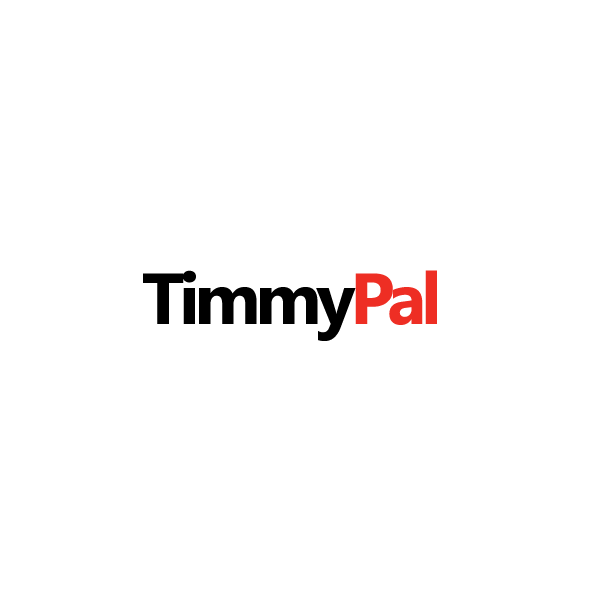
<style>
.page{position:relative;width:600px;height:600px;background:#ffffff}
.page>*{position:absolute;margin:0}
.t1{font:72px "Gadugi-Bold";letter-spacing:-0.07em;color:#000000}
.t2{font:72px "Gadugi-Bold";letter-spacing:-0.07em;color:#ee2e24}
</style>
<div class="page">
<p class="t1" style="left:143px;top:270px;width:294px;height:71px">Timmy<span class="t2">Pal</span></p>
</div>
